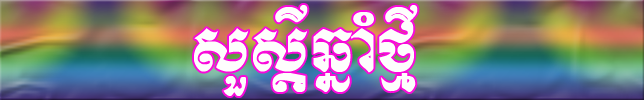
<style>
.page{position:relative;width:644px;height:100px}
.page>*{position:absolute;margin:0}
.t1{font:110.2px "LmnTTFantBig";color:#fefefd}
</style>
<div class="page">
<p class="t1" style="left:194px;top:5px;width:224px;height:91px">sYsþIqñaMfµI</p>
</div>
